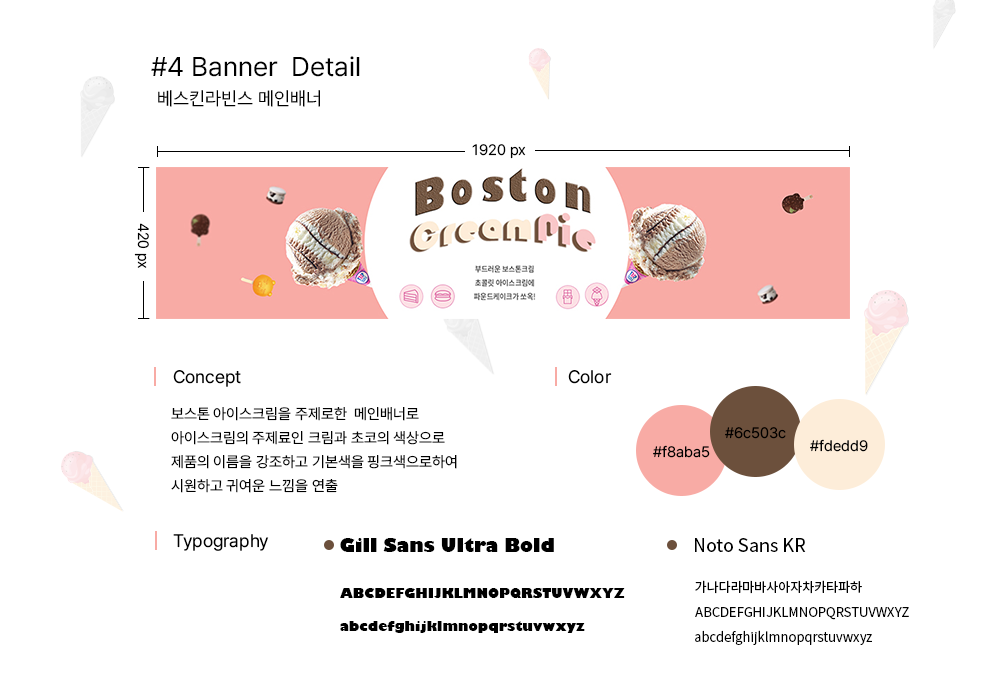
<style>
.page{position:relative;width:1000px;height:700px;background:#ffffff}
.page>*{position:absolute;margin:0}
.t1{font:27px "Pretendard-Regular";color:#000000}
.t2{font:18.7px "Pretendard-Regular";color:#000000}
.t3{font:15px "Pretendard-Regular";color:#000000}
.t4{font:18px "Pretendard-Regular";color:#000000}
.t5{font:15px/24px "Pretendard-Regular";color:#000000}
.t6{font:18px "GillSans-UltraBold";color:#000000}
.t7{font:18px "NotoSansKR-Regular";color:#000000}
.t8{font:13px "NotoSansKR-Regular";color:#000000}
.t9{font:13px "GillSans-UltraBold";color:#000000}
</style>
<div class="page">
<p class="t1" style="left:151px;top:56px;width:209px;height:21px">#4 Banner  Detail</p>
<p class="t2" style="left:158px;top:90px;width:162px;height:17px">베스킨라빈스 메인배너</p>
<p class="t3" style="left:472px;top:144px;width:54px;height:15px">1920 px</p>
<p class="t3" style="left:134px;top:223px;width:15px;height:45px;rotate:90deg">420 px</p>
<p class="t4" style="left:173px;top:370px;width:68px;height:17px">Concept</p>
<p class="t4" style="left:568px;top:370px;width:44px;height:14px">Color</p>
<p class="t5" style="left:171px;top:407px;width:286px;height:86px">보스톤 아이스크림을 주제로한  메인배너로<br>아이스크림의 주제료인 크림과 초코의 색상으로<br>제품의 이름을 강조하고 기본색을 핑크색으로하여<br>시원하고 귀여운 느낌을 연출</p>
<p class="t3" style="left:725px;top:427px;width:61px;height:12px">#6c503c</p>
<p class="t3" style="left:653px;top:445px;width:57px;height:13px">#f8aba5</p>
<p class="t3" style="left:810px;top:439px;width:58px;height:13px">#fdedd9</p>
<p class="t4" style="left:173px;top:534px;width:96px;height:17px">Typography</p>
<p class="t6" style="left:340px;top:538px;width:214px;height:14px">Gill Sans Ultra Bold</p>
<p class="t7" style="left:695px;top:538px;width:111px;height:14px">Noto Sans KR</p>
<p class="t8" style="left:695px;top:580px;width:167px;height:14px">가나다라마바사아자차카타파하</p>
<p class="t9" style="left:340px;top:588px;width:285px;height:10px">ABCDEFGHIJKLMNOPQRSTUVWXYZ</p>
<p class="t8" style="left:695px;top:607px;width:214px;height:13px">ABCDEFGHIJKLMNOPQRSTUVWXYZ</p>
<p class="t9" style="left:340px;top:621px;width:245px;height:12px">abcdefghijklmnopqrstuvwxyz</p>
<p class="t8" style="left:695px;top:630px;width:177px;height:15px">abcdefghijklmnopqrstuvwxyz</p>
</div>
